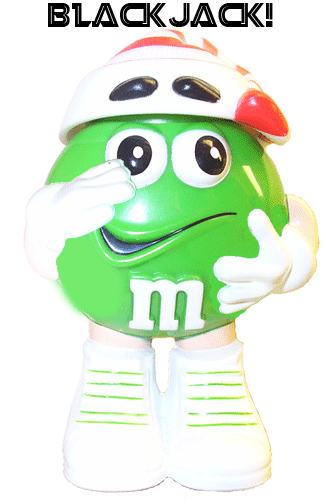
<style>
.page{position:relative;width:324px;height:500px;background:#ffffff}
.page>*{position:absolute;margin:0}
.t1{font:30px "Battlestar";color:#000000}
</style>
<div class="page">
<p class="t1" style="left:48px;top:0px;width:248px;height:31px">Blackjack!</p>
</div>
